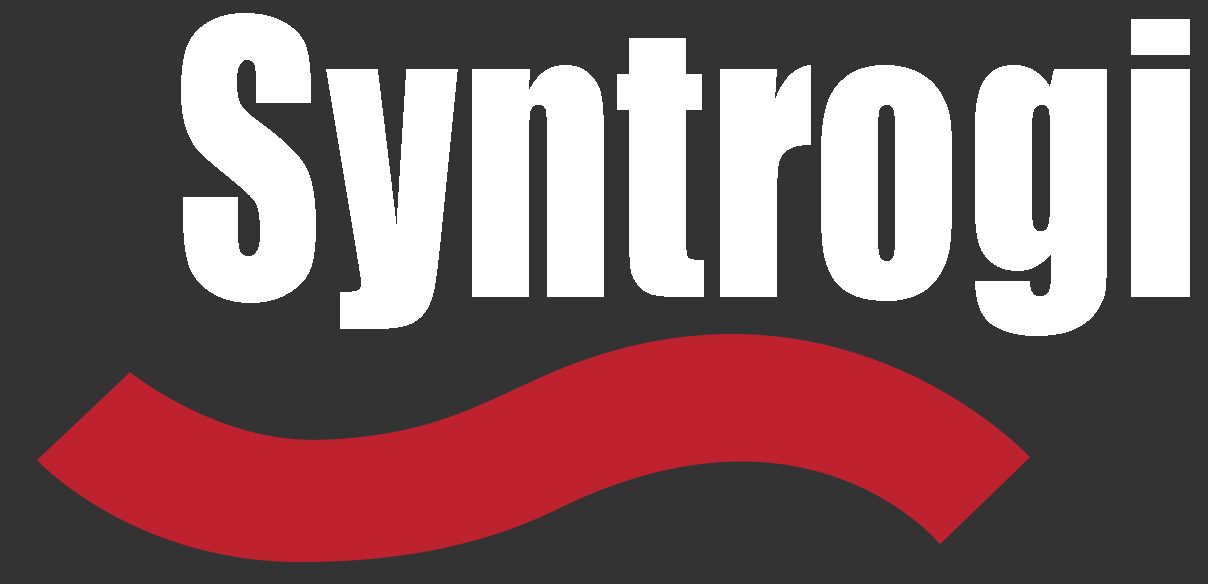
<style>
.page{position:relative;width:1208px;height:584px;background:#333333}
.page>*{position:absolute;margin:0}
.t1{font:351.6px "Impact";letter-spacing:0.01em;color:#ffffff;scale:0.82 1}
</style>
<div class="page">
<p class="t1" style="left:181px;top:13px;width:1009px;height:323px">Syntrogi</p>
</div>
